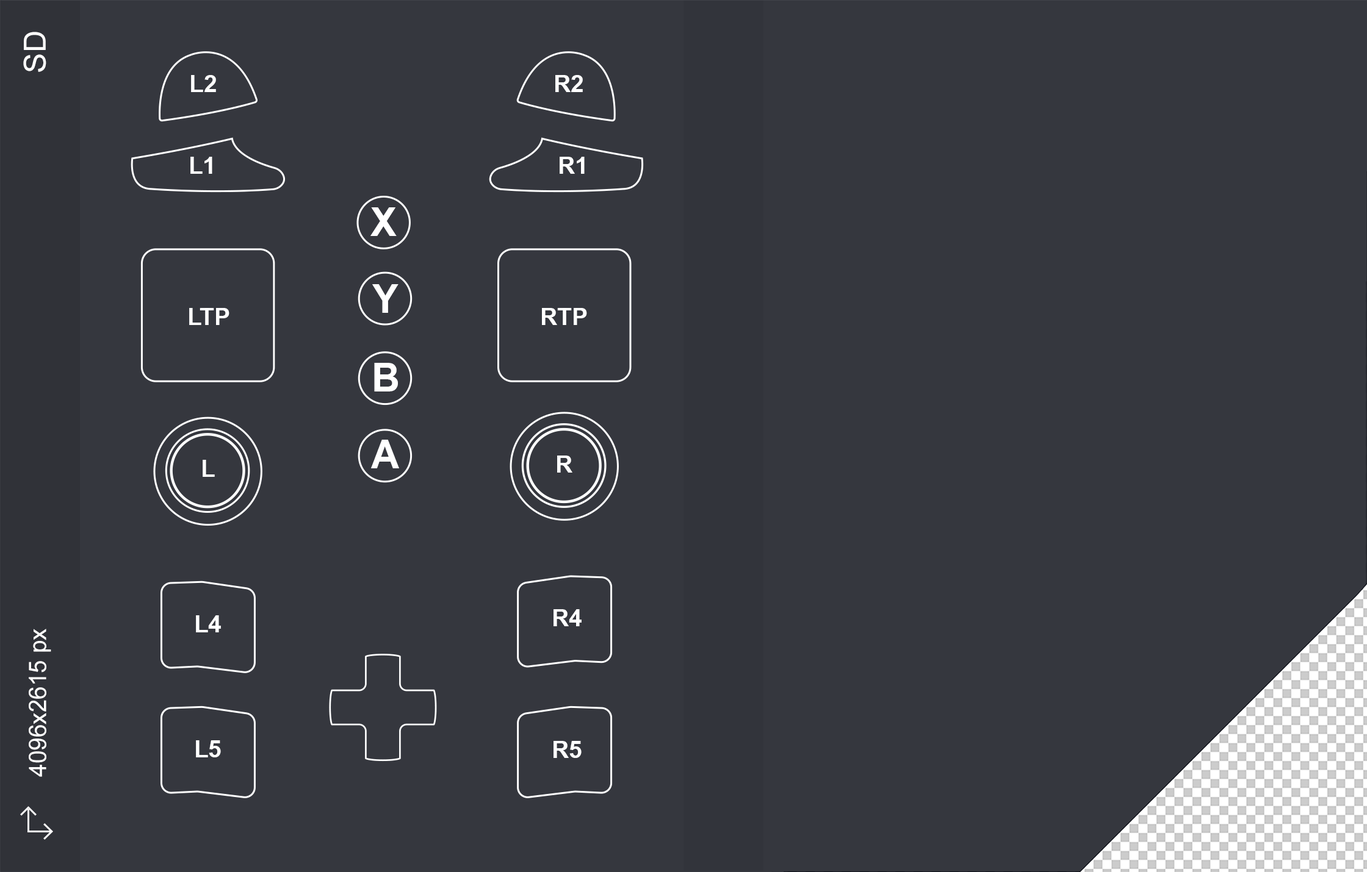
<style>
.page{position:relative;width:1367px;height:872px;background:#35373e}
.page>*{position:absolute;margin:0}
.t1{font:30.5px "ArialMT";color:#ffffff}
.t2{font:23.6px "Arial-BoldMT";color:#ffffff}
.t3{font:39.5px "Arial-BoldMT";color:#ffffff}
.t4{font:23.9px "ArialMT";color:#ffffff}
</style>
<div class="page">
<p class="t1" style="left:23px;top:32px;width:23px;height:40px;rotate:-90deg">SD</p>
<p class="t2" style="left:191px;top:75px;width:25px;height:17px">L2</p>
<p class="t2" style="left:555px;top:75px;width:28px;height:17px">R2</p>
<p class="t2" style="left:190px;top:157px;width:22px;height:17px">L1</p>
<p class="t2" style="left:559px;top:157px;width:26px;height:17px">R1</p>
<p class="t3" style="left:370px;top:207px;width:27px;height:29px">X</p>
<p class="t3" style="left:372px;top:284px;width:26px;height:29px">Y</p>
<p class="t2" style="left:189px;top:308px;width:40px;height:17px">LTP</p>
<p class="t2" style="left:542px;top:308px;width:45px;height:17px">RTP</p>
<p class="t3" style="left:374px;top:363px;width:24px;height:29px">B</p>
<p class="t3" style="left:371px;top:440px;width:28px;height:29px">A</p>
<p class="t2" style="left:203px;top:460px;width:12px;height:17px">L</p>
<p class="t2" style="left:557px;top:456px;width:15px;height:17px">R</p>
<p class="t2" style="left:196px;top:616px;width:25px;height:17px">L4</p>
<p class="t2" style="left:553px;top:610px;width:28px;height:17px">R4</p>
<p class="t4" style="left:29px;top:629px;width:22px;height:148px;rotate:-90deg">4096x2615 px</p>
<p class="t2" style="left:196px;top:741px;width:25px;height:17px">L5</p>
<p class="t2" style="left:553px;top:741px;width:28px;height:17px">R5</p>
</div>
